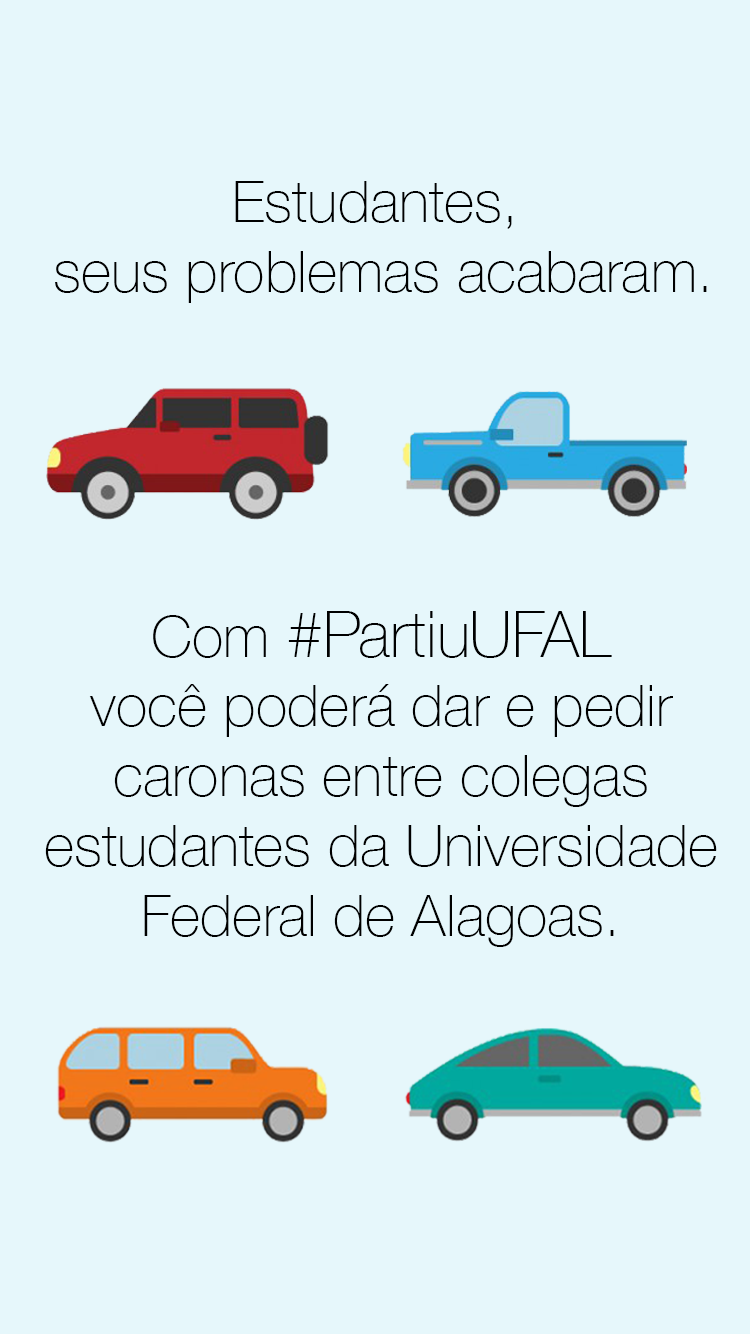
<style>
.page{position:relative;width:750px;height:1334px;background:#e6f7fb}
.page>*{position:absolute;margin:0}
.t1{font:58.2px "HelveticaNeue-Thin";color:#000000}
.t2{font:63.5px "HelveticaNeue-Thin";color:#000000}
</style>
<div class="page">
<p class="t1" style="left:55px;top:181px;width:652px;height:122px;text-align:center">Estudantes, <br>seus problemas acabaram.</p>
<p class="t1" style="left:45px;top:611px;width:672px;height:336px;text-align:center">Com<span class="t2"> #PartiuUFAL<br></span>você poderá dar e pedir<br>caronas entre colegas<br>estudantes da Universidade<br>Federal de Alagoas.</p>
</div>
